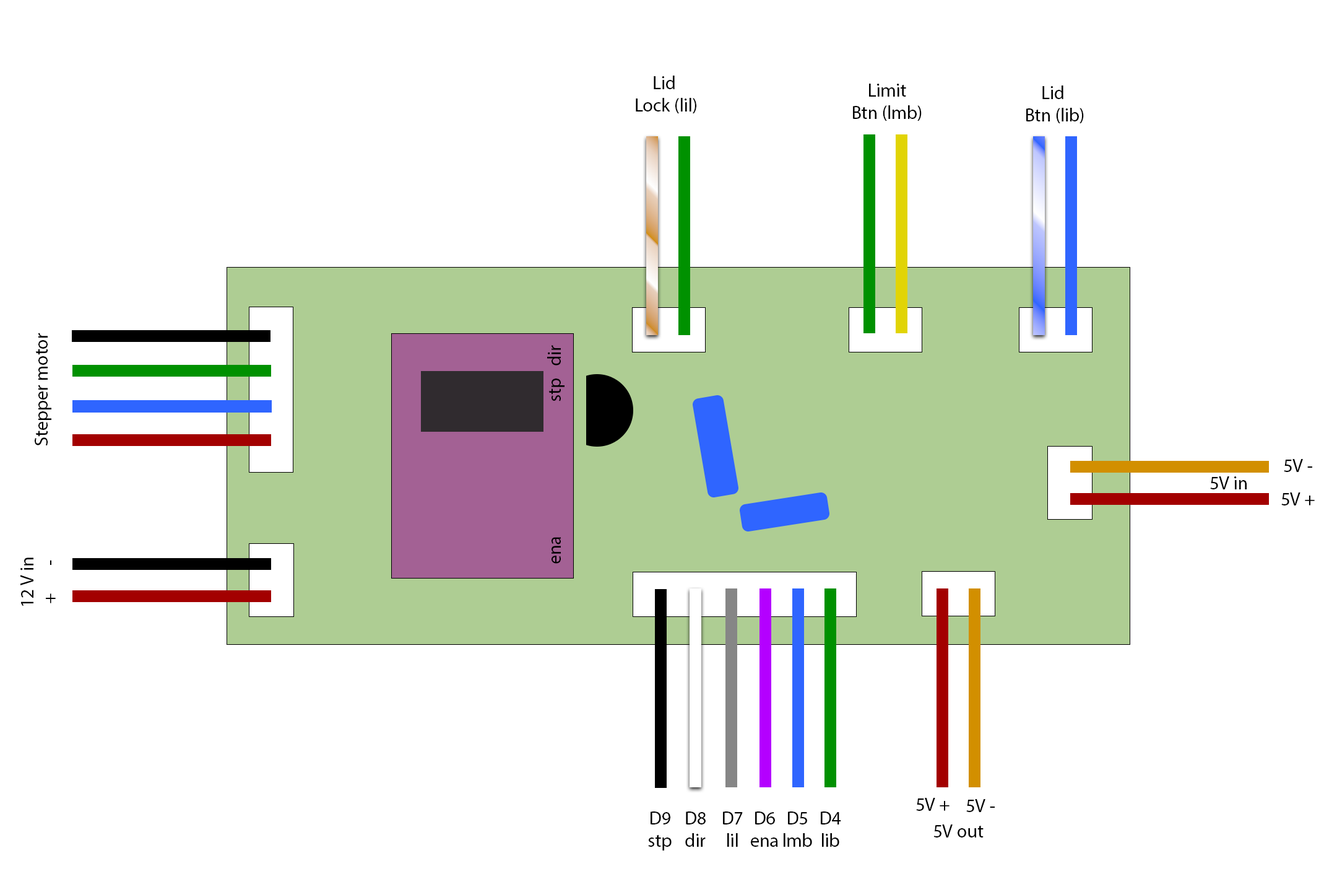
<style>
.page{position:relative;width:1337px;height:892px;background:#ffffff}
.page>*{position:absolute;margin:0}
.t1{font:18.6px "MyriadPro-Regular";color:#000000}
</style>
<div class="page">
<p class="t1" style="left:636px;top:76px;width:61px;height:37px;text-align:center">Lid <br>Lock (lil)</p>
<p class="t1" style="left:853px;top:84px;width:69px;height:37px;text-align:center">Limit<br>Btn (lmb)</p>
<p class="t1" style="left:1027px;top:85px;width:57px;height:38px;text-align:center">Lid <br>Btn (lib)</p>
<p class="t1" style="left:35px;top:332px;width:16px;height:114px;rotate:-90deg">Stepper motor</p>
<p class="t1" style="left:547px;top:345px;width:18px;height:218px;rotate:-90deg">ena                                  stp   dir</p>
<p class="t1" style="left:1284px;top:459px;width:29px;height:13px">5V -</p>
<p class="t1" style="left:1210px;top:476px;width:37px;height:13px">5V in</p>
<p class="t1" style="left:1282px;top:492px;width:33px;height:13px">5V +</p>
<p class="t1" style="left:20px;top:557px;width:36px;height:49px;text-align:center;rotate:-90deg">12 V in<br>+       -</p>
<p class="t1" style="left:916px;top:797px;width:34px;height:13px">5V +</p>
<p class="t1" style="left:967px;top:799px;width:28px;height:13px">5V -</p>
<p class="t1" style="left:648px;top:811px;width:24px;height:39px;text-align:center">D9<br>stp</p>
<p class="t1" style="left:685px;top:811px;width:21px;height:35px;text-align:center">D8<br>dir</p>
<p class="t1" style="left:723px;top:811px;width:20px;height:35px;text-align:center">D7<br>lil</p>
<p class="t1" style="left:751px;top:811px;width:27px;height:35px;text-align:center">D6<br>ena</p>
<p class="t1" style="left:784px;top:811px;width:28px;height:35px;text-align:center">D5<br>lmb</p>
<p class="t1" style="left:821px;top:811px;width:20px;height:35px;text-align:center">D4<br>lib</p>
<p class="t1" style="left:934px;top:824px;width:50px;height:13px">5V out</p>
</div>
